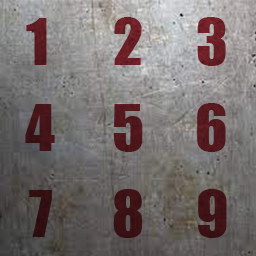
<style>
.page{position:relative;width:256px;height:256px}
.page>*{position:absolute;margin:0}
.t1{font:60px "Impact";color:#6d2026}
.t2{font:60px "Impact";color:#5a1b20}
.t3{font:60px "Impact";color:#431418}
.t4{font:60px "Impact";color:#4f171c}
.t5{font:60px "Impact";color:#54191e}
.t6{font:60px "Impact";color:#300e11}
.t7{font:60px "Impact";color:#3b1215}
.t8{font:60px "Impact";color:#3e1216}
</style>
<div class="page">
<p class="t1" style="left:114px;top:17px;width:28px;height:48px">2</p>
<p class="t1" style="left:197px;top:17px;width:29px;height:49px">3</p>
<p class="t2" style="left:26px;top:18px;width:21px;height:47px">1</p>
<p class="t3" style="left:25px;top:104px;width:30px;height:47px">4</p>
<p class="t4" style="left:113px;top:104px;width:30px;height:48px">5</p>
<p class="t5" style="left:197px;top:103px;width:29px;height:49px">6</p>
<p class="t6" style="left:29px;top:190px;width:23px;height:47px">7</p>
<p class="t7" style="left:113px;top:189px;width:30px;height:49px">8</p>
<p class="t8" style="left:198px;top:189px;width:29px;height:49px">9</p>
</div>
